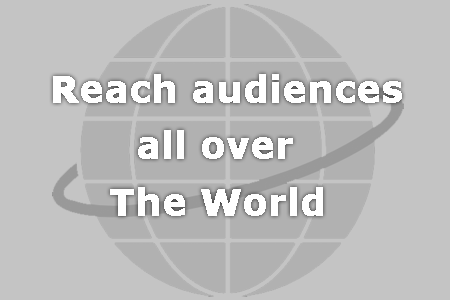
<style>
.page{position:relative;width:450px;height:300px;background:#c4c4c4}
.page>*{position:absolute;margin:0}
.t1{font:36px "Verdana-Bold";color:#ffffff;font-weight:bold}
</style>
<div class="page">
<p class="t1" style="left:53px;top:74px;width:349px;height:29px">Reach audiences</p>
<p class="t1" style="left:138px;top:130px;width:155px;height:29px">all over</p>
<p class="t1" style="left:110px;top:187px;width:213px;height:29px">The World</p>
</div>
